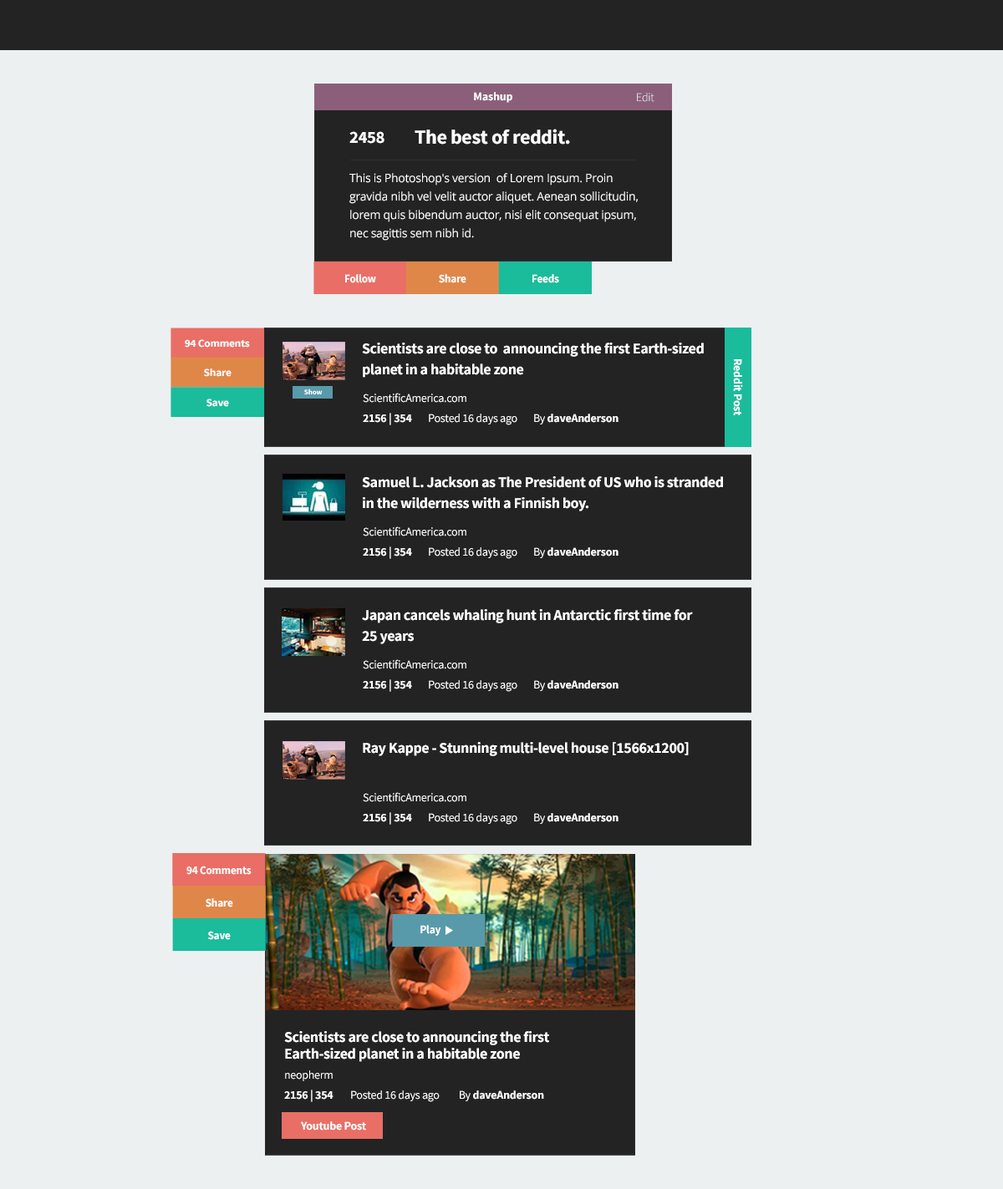
<style>
.page{position:relative;width:1003px;height:1189px;background:#ecf0f1}
.page>*{position:absolute;margin:0}
.t1{font:11.7px "SourceSansPro-Bold";letter-spacing:-0.02em;color:#ffffff}
.t2{font:11.7px "SourceSansPro-Light";letter-spacing:-0.02em}
.t3{font:17.2px "SourceSansPro-Bold";letter-spacing:-0.02em;color:#ffffff}
.t4{font:20.1px "SourceSansPro-Bold";letter-spacing:-0.02em;color:#ffffff}
.t5{font:11.7px/18.4px "OpenSans";letter-spacing:-0.02em;color:#ffffff}
.t6{font:11.7px "SourceSansPro-Bold";letter-spacing:-0.02em;color:#ffffff;scale:0.95 1}
.t7{font:10.8px "SourceSansPro-Bold";letter-spacing:-0.02em;color:#ffffff;scale:1.04 1}
.t8{font:15px/16.7px "SourceSansPro-Bold";letter-spacing:-0.025em;color:#ffffff}
.t9{font:7.2px "SourceSansPro-Bold";letter-spacing:-0.02em;color:#ffffff;scale:1.06 1}
.t10{font:11.7px "SourceSansPro-Regular";letter-spacing:-0.02em;color:#ffffff}
.t11{font:15px "SourceSansPro-Bold";letter-spacing:-0.025em;color:#ffffff}
</style>
<div class="page">
<p class="t1" style="left:474px;top:92px;width:38px;height:11px">Mashup</p>
<p class="t2" style="left:637px;top:93px;width:17px;height:9px">Edit</p>
<p class="t3" style="left:349px;top:131px;width:35px;height:13px">2458</p>
<p class="t4" style="left:414px;top:129px;width:156px;height:16px">The best of reddit.</p>
<p class="t5" style="left:349px;top:173px;width:289px;height:68px">This is Photoshop's version  of Lorem Ipsum. Proin gravida nibh vel velit auctor aliquet. Aenean sollicitudin, lorem quis bibendum auctor, nisi elit consequat ipsum, nec sagittis sem nibh id.</p>
<p class="t6" style="left:345px;top:274px;width:31px;height:9px">Follow</p>
<p class="t6" style="left:439px;top:274px;width:27px;height:9px">Share</p>
<p class="t6" style="left:532px;top:274px;width:27px;height:9px">Feeds</p>
<p class="t7" style="left:185px;top:339px;width:65px;height:9px">94 Comments</p>
<p class="t8" style="left:362px;top:343px;width:342px;height:35px">Scientists are close to  announcing the first Earth-sized <br>planet in a habitable zone</p>
<p class="t1" style="left:733px;top:359px;width:10px;height:57px;rotate:90deg">Reddit Post</p>
<p class="t7" style="left:204px;top:369px;width:27px;height:8px">Share</p>
<p class="t9" style="left:304px;top:389px;width:19px;height:5px">Show</p>
<p class="t7" style="left:206px;top:399px;width:23px;height:8px">Save</p>
<p class="t10" style="left:363px;top:393px;width:103px;height:10px">ScientificAmerica.com</p>
<p class="t1" style="left:363px;top:413px;width:49px;height:12px">2156 | 354</p>
<p class="t10" style="left:429px;top:414px;width:88px;height:11px">Posted 16 days ago</p>
<p class="t1" style="left:534px;top:414px;width:84px;height:11px"><span class="t10">By </span>daveAnderson</p>
<p class="t8" style="left:362px;top:476px;width:361px;height:35px">Samuel L. Jackson as The President of US who is stranded <br>in the wilderness with a Finnish boy.</p>
<p class="t10" style="left:363px;top:526px;width:103px;height:10px">ScientificAmerica.com</p>
<p class="t1" style="left:363px;top:547px;width:49px;height:12px">2156 | 354</p>
<p class="t10" style="left:429px;top:547px;width:88px;height:12px">Posted 16 days ago</p>
<p class="t1" style="left:534px;top:547px;width:84px;height:11px"><span class="t10">By </span>daveAnderson</p>
<p class="t8" style="left:362px;top:609px;width:331px;height:35px">Japan cancels whaling hunt in Antarctic first time for <br>25 years</p>
<p class="t10" style="left:363px;top:659px;width:103px;height:10px">ScientificAmerica.com</p>
<p class="t1" style="left:363px;top:679px;width:49px;height:13px">2156 | 354</p>
<p class="t10" style="left:429px;top:680px;width:88px;height:12px">Posted 16 days ago</p>
<p class="t1" style="left:534px;top:680px;width:84px;height:11px"><span class="t10">By </span>daveAnderson</p>
<p class="t11" style="left:363px;top:742px;width:326px;height:14px">Ray Kappe - Stunning multi-level house [1566x1200]</p>
<p class="t10" style="left:363px;top:792px;width:103px;height:10px">ScientificAmerica.com</p>
<p class="t1" style="left:363px;top:812px;width:49px;height:13px">2156 | 354</p>
<p class="t10" style="left:429px;top:813px;width:88px;height:12px">Posted 16 days ago</p>
<p class="t1" style="left:534px;top:813px;width:84px;height:11px"><span class="t10">By </span>daveAnderson</p>
<p class="t6" style="left:186px;top:866px;width:66px;height:9px">94 Comments</p>
<p class="t6" style="left:206px;top:898px;width:27px;height:10px">Share</p>
<p class="t6" style="left:420px;top:925px;width:21px;height:11px">Play</p>
<p class="t6" style="left:208px;top:931px;width:23px;height:9px">Save</p>
<p class="t8" style="left:284px;top:1031px;width:265px;height:31px">Scientists are close to announcing the first Earth-sized planet in a habitable zone</p>
<p class="t10" style="left:285px;top:1070px;width:48px;height:11px">neopherm</p>
<p class="t1" style="left:284px;top:1090px;width:49px;height:12px">2156 | 354</p>
<p class="t10" style="left:351px;top:1091px;width:89px;height:11px">Posted 16 days ago</p>
<p class="t1" style="left:460px;top:1091px;width:84px;height:10px"><span class="t10">By </span>daveAnderson</p>
<p class="t1" style="left:301px;top:1121px;width:65px;height:10px">Youtube Post</p>
</div>
